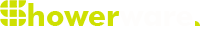
<style>
.page{position:relative;width:200px;height:31px;background:#ffffff}
.page>*{position:absolute;margin:0}
.t1{font:30px "FuturaBT-Bold";color:#cee002}
.t2{font:30px "FuturaBT-Bold";color:#fefdfc}
</style>
<div class="page">
<p class="t1" style="left:28px;top:3px;width:165px;height:23px">hower<span class="t2">ware</span></p>
</div>
